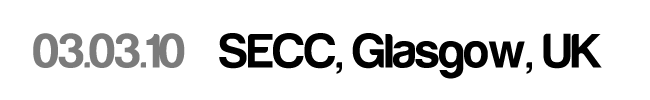
<style>
.page{position:relative;width:650px;height:100px;background:#ffffff}
.page>*{position:absolute;margin:0}
.t1{font:50px "Harabara-Bold";color:#000000}
.t2{font:50px "Harabara-Bold";color:#7b7b7b}
</style>
<div class="page">
<p class="t1" style="left:33px;top:33px;width:569px;height:46px"><span class="t2">03.03.10</span>   SECC, Glasgow, UK</p>
</div>
